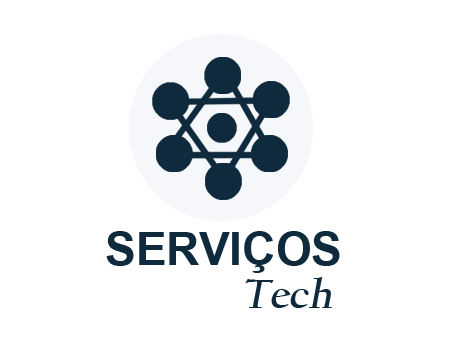
<style>
.page{position:relative;width:454px;height:340px;background:#ffffff}
.page>*{position:absolute;margin:0}
.t1{font:46.2px "Arial-BoldMT";color:#0f2a3d}
.t2{font:42.3px "CalifornianFB-Bold";color:#0f2a3d;font-style:italic}
</style>
<div class="page">
<p class="t1" style="left:106px;top:231px;width:234px;height:42px">SERVIÇOS</p>
<p class="t2" style="left:245px;top:277px;width:87px;height:31px">Tech</p>
</div>
